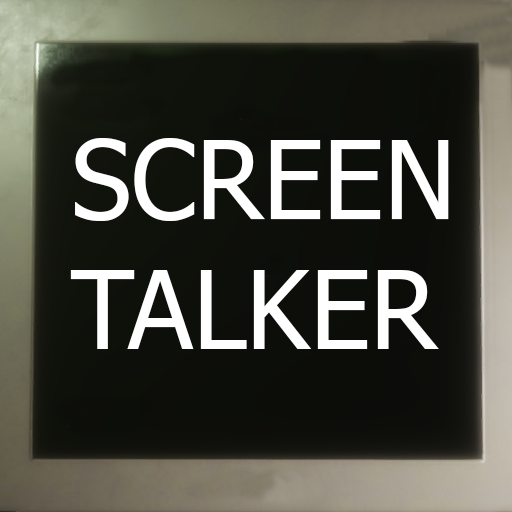
<style>
.page{position:relative;width:512px;height:512px}
.page>*{position:absolute;margin:0}
.t1{font:77.7px "Tahoma";color:#ffffff}
</style>
<div class="page">
<p class="t1" style="left:70px;top:138px;width:379px;height:211px">SCREEN<br>TALKER</p>
</div>
